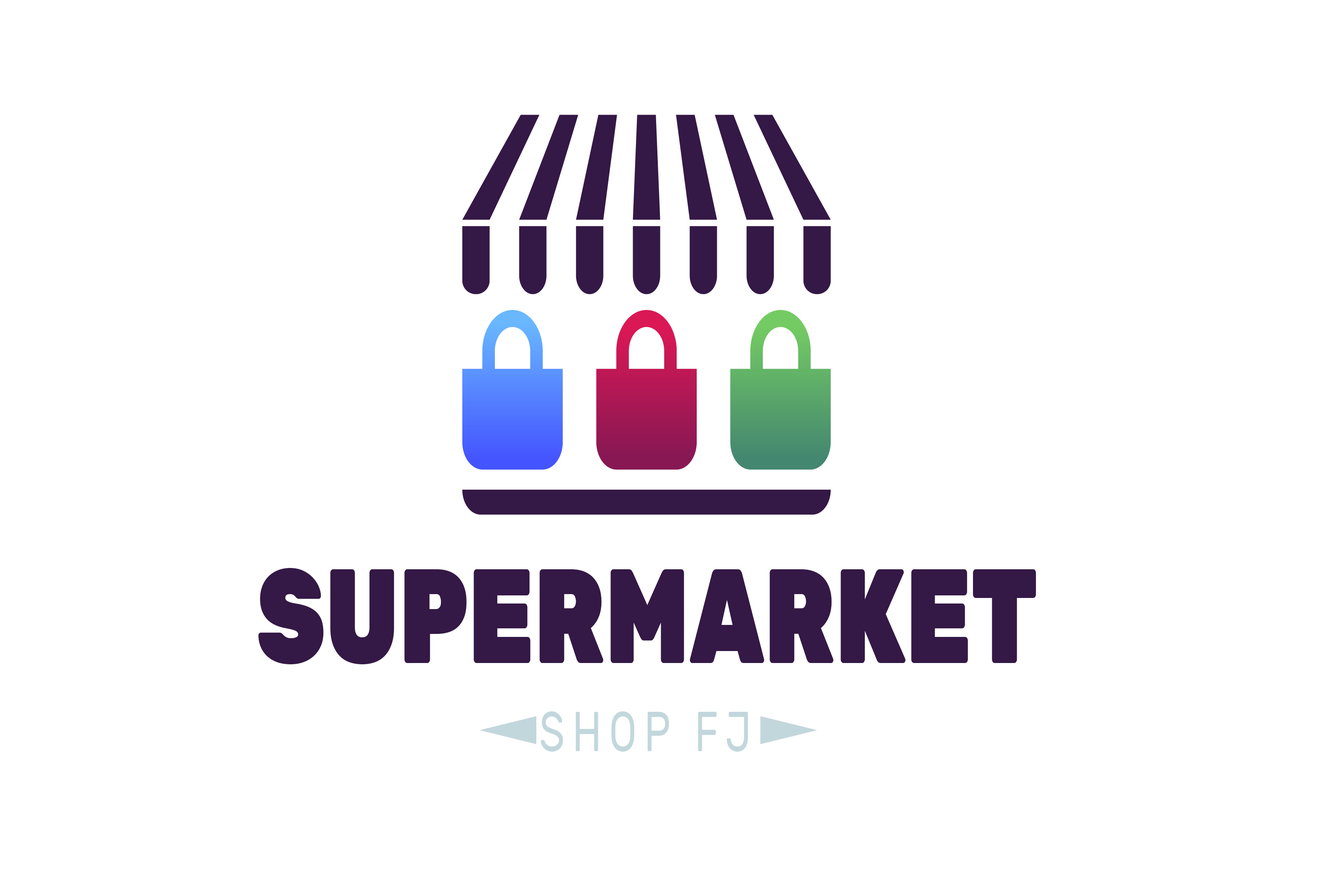
<style>
.page{position:relative;width:1337px;height:892px;background:#ffffff}
.page>*{position:absolute;margin:0}
.t1{font:133.9px "Rubik-Black";color:#341846;text-transform:uppercase;scale:0.74 1}
.t2{font:55.9px "Rubik-Regular";letter-spacing:0.18em;color:#c2d7dc;text-transform:uppercase;scale:0.74 1}
</style>
<div class="page">
<p class="t1" style="left:258px;top:568px;width:779px;height:96px">Supermarket</p>
<p class="t2" style="left:541px;top:711px;width:207px;height:40px">shop FJ</p>
</div>
